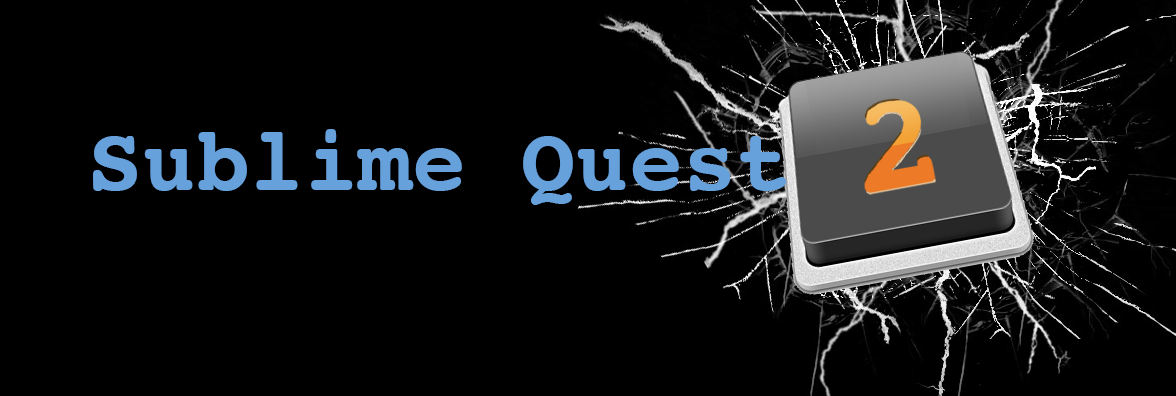
<style>
.page{position:relative;width:1176px;height:396px;background:#000000}
.page>*{position:absolute;margin:0}
.t1{font:90px "Courier-Bold";color:#66a1dc}
</style>
<div class="page">
<p class="t1" style="left:93px;top:129px;width:694px;height:76px">Sublime Quest</p>
</div>
